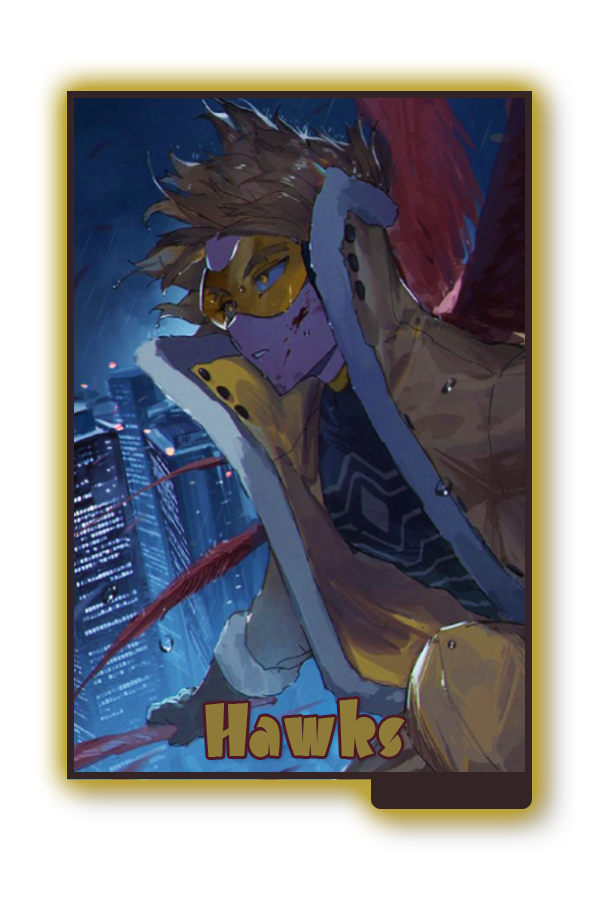
<style>
.page{position:relative;width:600px;height:900px;background:#ffffff}
.page>*{position:absolute;margin:0}
.t1{font:75px "Airmole";color:#8e7b37;scale:1.06 1}
</style>
<div class="page">
<p class="t1" style="left:205px;top:699px;width:200px;height:59px">Hawks</p>
</div>
